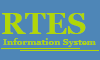
<style>
.page{position:relative;width:100px;height:60px;background:#4e86b7}
.page>*{position:absolute;margin:0}
.t1{font:30px "Vani-Bold";color:#b1d607}
.t2{font:9px "Vani-Bold";color:#b1d607}
</style>
<div class="page">
<p class="t1" style="left:2px;top:13px;width:84px;height:21px">RTES</p>
<p class="t2" style="left:3px;top:38px;width:93px;height:9px">Information System</p>
</div>
